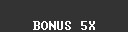
<style>
.page{position:relative;width:128px;height:32px;background:#333333}
.page>*{position:absolute;margin:0}
.t1{font:12px "Terminal";color:#ffffff}
</style>
<div class="page">
<p class="t1" style="left:33px;top:21px;width:62px;height:9px">BONUS 5X</p>
</div>
